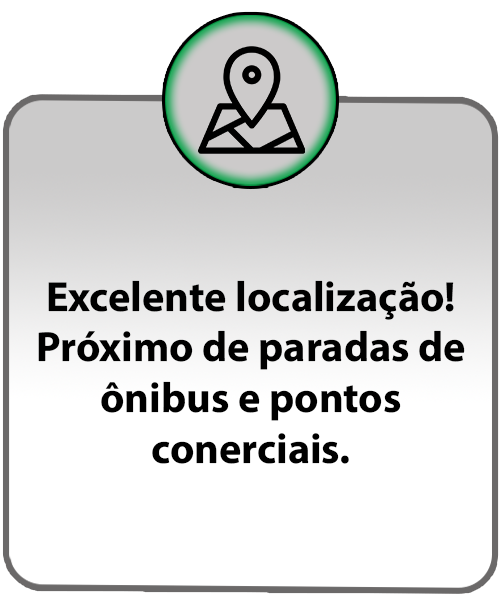
<style>
.page{position:relative;width:500px;height:600px;background:#ffffff}
.page>*{position:absolute;margin:0}
.t1{font:42.3px "MyriadConceptRoman-Bold";color:#000000}
</style>
<div class="page">
<p class="t1" style="left:38px;top:280px;width:427px;height:184px;text-align:center">Excelente localização!<br>Próximo de paradas de<br>ônibus e pontos<br>conerciais.</p>
</div>
